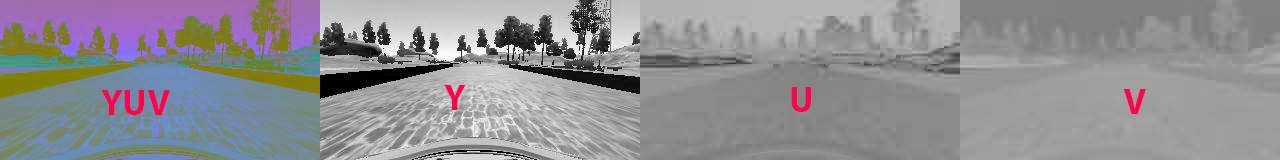
<style>
.page{position:relative;width:1280px;height:160px}
.page>*{position:absolute;margin:0}
.t1{font:36px "MyriadPro-Bold";color:#fd034e}
</style>
<div class="page">
<p class="t1" style="left:444px;top:85px;width:22px;height:25px">Y</p>
<p class="t1" style="left:791px;top:87px;width:20px;height:25px">U</p>
<p class="t1" style="left:1123px;top:89px;width:23px;height:25px">V</p>
<p class="t1" style="left:101px;top:90px;width:69px;height:25px">YUV</p>
</div>
